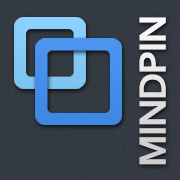
<style>
.page{position:relative;width:180px;height:180px}
.page>*{position:absolute;margin:0}
.t1{font:40px "Corbel-Bold";letter-spacing:-0.05em;color:#e2e2e2}
</style>
<div class="page">
<p class="t1" style="left:139px;top:17px;width:27px;height:148px;rotate:-90deg">MINDPIN</p>
</div>
